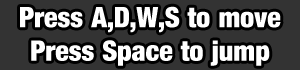
<style>
.page{position:relative;width:300px;height:70px;background:#333333}
.page>*{position:absolute;margin:0}
.t1{font:28px "Harvest";color:#ffffff}
</style>
<div class="page">
<p class="t1" style="left:20px;top:6px;width:261px;height:60px;text-align:center">Press A,D,W,S to move<br>Press Space to jump</p>
</div>
